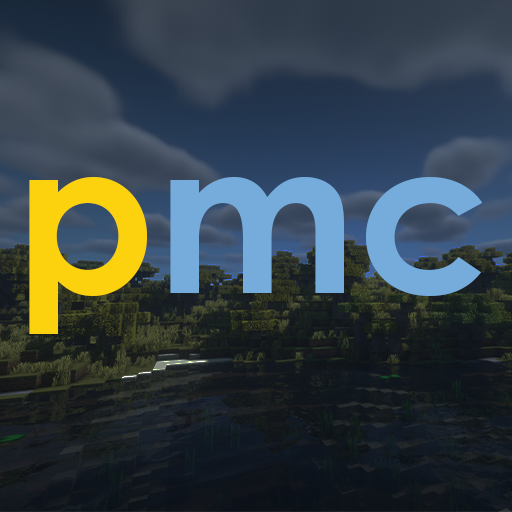
<style>
.page{position:relative;width:512px;height:512px}
.page>*{position:absolute;margin:0}
.t1{font:213.6px "CenturyGothicPro-Bold";color:#76acdc}
.t2{font:213.6px "CenturyGothicPro-Bold";color:#fcd20f}
</style>
<div class="page">
<p class="t1" style="left:29px;top:177px;width:454px;height:157px"><span class="t2">p</span>mc</p>
</div>
